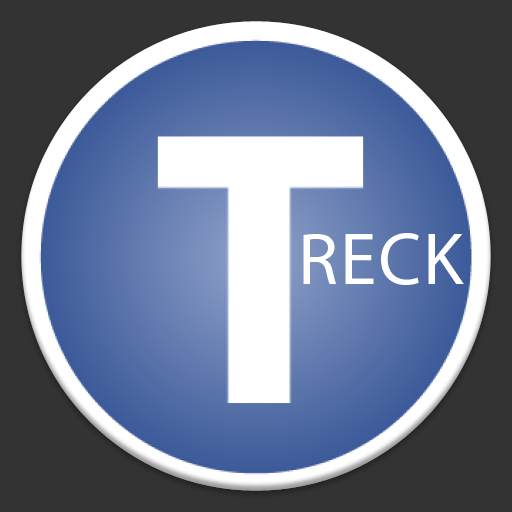
<style>
.page{position:relative;width:512px;height:512px;background:#333333}
.page>*{position:absolute;margin:0}
.t1{font:74px "MyriadPro-Regular";letter-spacing:0.025em;color:#ffffff}
</style>
<div class="page">
<p class="t1" style="left:303px;top:233px;width:161px;height:52px">RECK</p>
</div>
